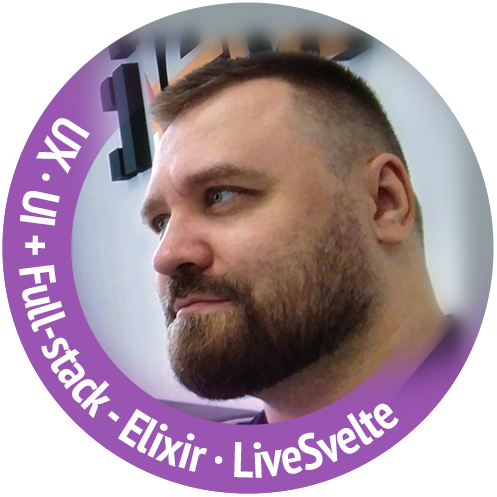
<style>
.page{position:relative;width:497px;height:497px;background:#ffffff}
.page>*{position:absolute;margin:0}
.t1{font:50px/19px "PTSans-NarrowBold";color:#ffffff}
</style>
<div class="page">
<p class="t1" style="left:19px;top:118px;width:380px;height:360px;text-align:center">UX · UI + Full-stack - Elixir · LiveSvelte</p>
</div>
